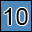
<style>
.page{position:relative;width:32px;height:32px;background:#4e88b9}
.page>*{position:absolute;margin:0}
.t1{font:24px "ArialMT";letter-spacing:0.013em;color:#000000}
</style>
<div class="page">
<p class="t1" style="left:4px;top:8px;width:24px;height:17px">10</p>
</div>
